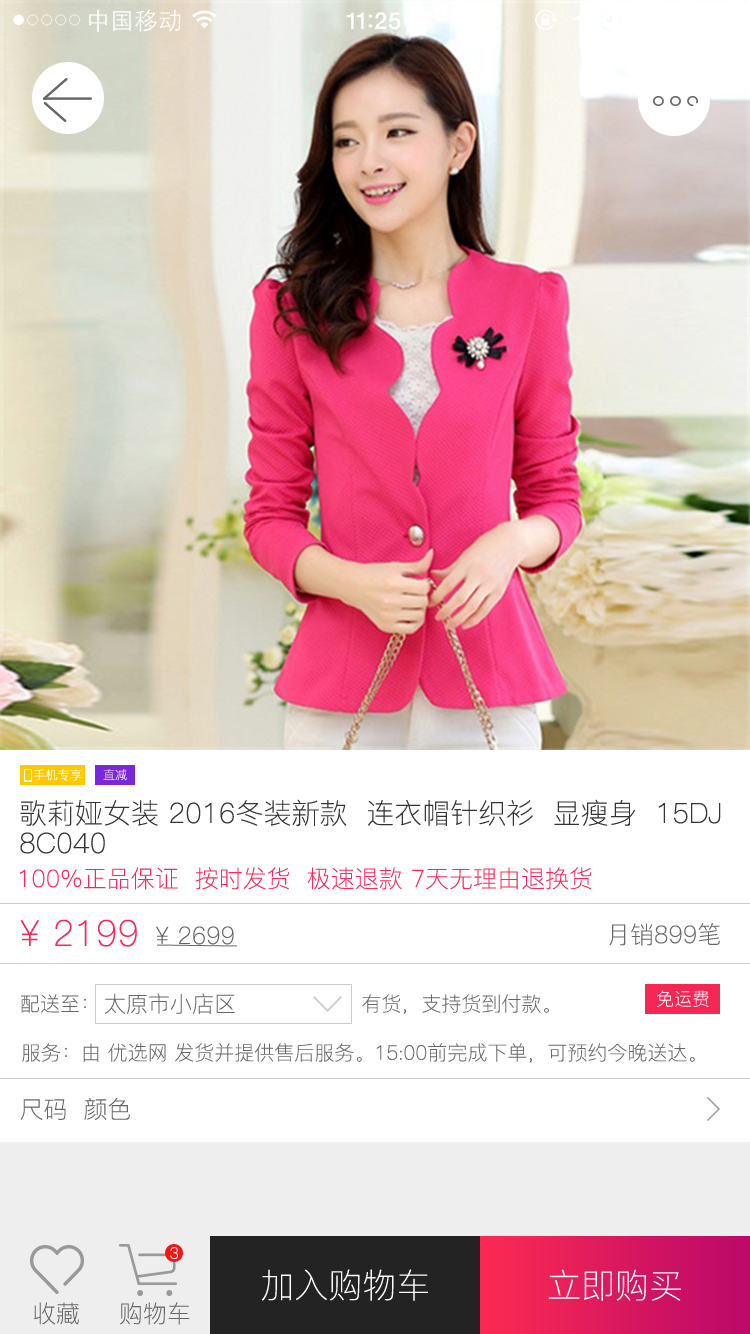
<style>
.page{position:relative;width:750px;height:1334px;background:#ffffff}
.page>*{position:absolute;margin:0}
.t1{font:12px "PingFang-SC-Light";color:#ffffff;font-weight:bold}
.t2{font:12px "PingFang-SC-Light"}
.t3{font:28px/30px "PingFang-SC-Light";color:#333333}
.t4{font:24px "PingFang-SC-Light";color:#f92854}
.t5{font:36px "PingFang-SC-Light";color:#f92854}
.t6{font:24px "PingFang-SC-Light";color:#666666}
.t7{font:18px "PingFang-SC-Light";color:#ffffff}
.t8{font:20px "PingFang-SC-Light";color:#666666}
.t9{font:22px "PingFang-SC-Light";color:#666666}
.t10{font:16px "PingFang-SC-Light";color:#ffffff}
.t11{font:34px "PingFang-SC-Light";color:#ffffff}
</style>
<div class="page">
<p class="t1" style="left:33px;top:769px;width:49px;height:12px">手机专享</p>
<p class="t2" style="left:103px;top:769px;width:24px;height:12px">直减</p>
<p class="t3" style="left:20px;top:799px;width:701px;height:55px">歌莉娅女装 2016冬装新款  连衣帽针织衫  显瘦身  15DJ<br>8C040</p>
<p class="t4" style="left:20px;top:867px;width:572px;height:23px">100%正品保证  按时发货  极速退款 7天无理由退换货</p>
<p class="t5" style="left:20px;top:919px;width:117px;height:28px">¥ 2199</p>
<p class="t6" style="left:156px;top:926px;width:78px;height:19px">¥ 2699</p>
<p class="t6" style="left:609px;top:923px;width:111px;height:23px">月销899笔</p>
<p class="t7" style="left:657px;top:990px;width:52px;height:17px">免运费</p>
<p class="t8" style="left:21px;top:994px;width:65px;height:19px">配送至：</p>
<p class="t9" style="left:104px;top:993px;width:131px;height:21px">太原市小店区</p>
<p class="t8" style="left:362px;top:994px;width:187px;height:20px">有货，支持货到付款。</p>
<p class="t8" style="left:22px;top:1043px;width:673px;height:20px">服务：由 优选网 发货并提供售后服务。15:00前完成下单，可预约今晚送达。</p>
<p class="t6" style="left:20px;top:1098px;width:110px;height:22px">尺码  颜色</p>
<p class="t10" style="left:170px;top:1247px;width:8px;height:13px">3</p>
<p class="t11" style="left:261px;top:1269px;width:167px;height:32px">加入购物车</p>
<p class="t11" style="left:548px;top:1269px;width:133px;height:32px">立即购买</p>
<p class="t6" style="left:34px;top:1302px;width:45px;height:23px">收藏</p>
<p class="t6" style="left:120px;top:1302px;width:70px;height:23px">购物车</p>
</div>
